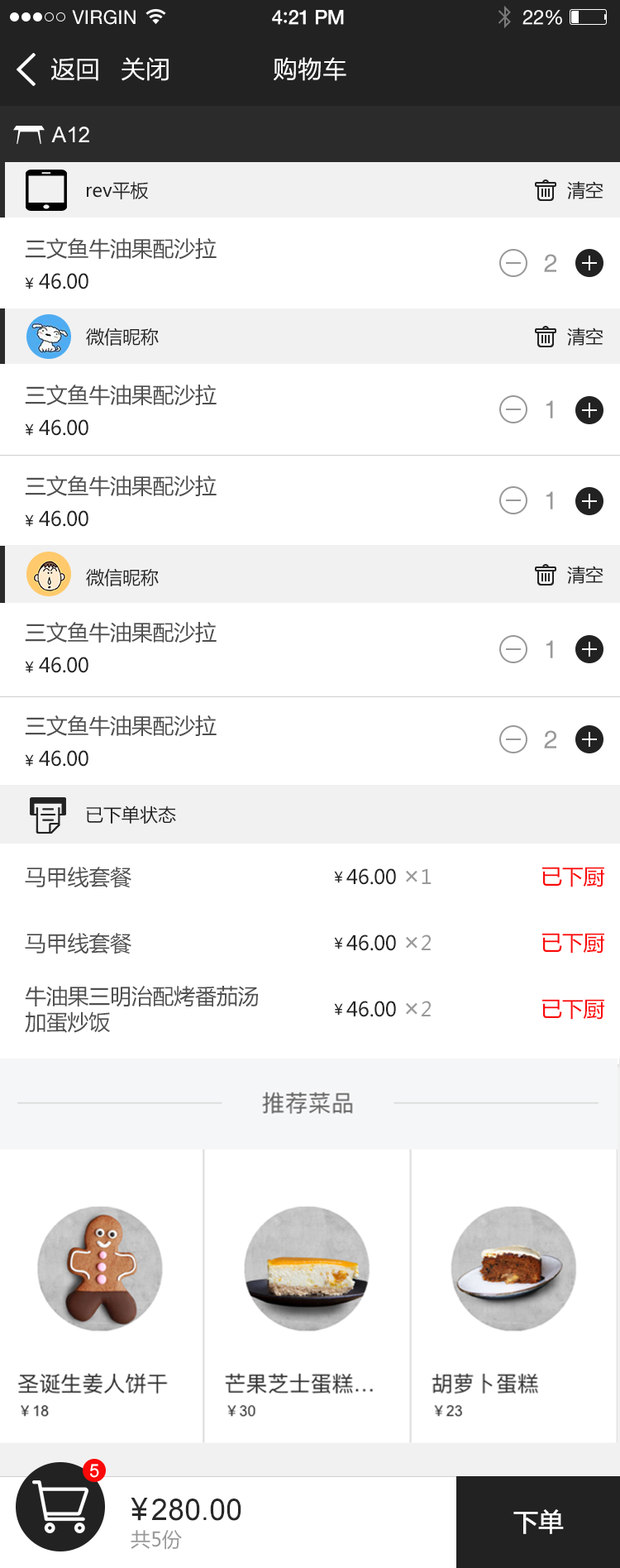
<style>
.page{position:relative;width:620px;height:1568px;background:#ffffff}
.page>*{position:absolute;margin:0}
.t1{font:19px "HelveticaNeue";letter-spacing:0.02em;color:#ffffff}
.t2{font:19.8px "HelveticaNeue-Medium";letter-spacing:-0.02em;color:#ffffff}
.t3{font:21.5px "Avenir-Medium";letter-spacing:-0.02em;color:#ffffff}
.t4{font:19.8px "HelveticaNeue";letter-spacing:-0.02em;color:#ffffff}
.t5{font:24.8px "FZLTHK--GBK1-0";color:#ffffff}
.t6{font:21.5px "ArialMT";color:#ffffff}
.t7{font:18.2px "MicrosoftYaHei";color:#222222}
.t8{font:21.5px "MicrosoftYaHei";letter-spacing:-0.01em;color:#4f4f4f}
.t9{font:24.8px "Helvetica";letter-spacing:-0.01em;color:#999999}
.t10{font:14.9px "MicrosoftYaHei";letter-spacing:-0.01em;color:#222222}
.t11{font:19.8px "MicrosoftYaHei";letter-spacing:-0.01em;color:#222222}
.t12{font:24.8px "MicrosoftYaHei";letter-spacing:-0.01em;color:#999999}
.t13{font:19.8px "MicrosoftYaHei";letter-spacing:-0.01em;color:#999999}
.t14{font:21.5px "MicrosoftYaHei";letter-spacing:-0.01em;color:#fb0909}
.t15{font:18.2px "ArialMT";color:#ffffff}
.t16{font:29.8px "MicrosoftYaHei";letter-spacing:-0.01em;color:#282828}
.t17{font:29.8px "ArialMT";color:#282828}
.t18{font:24.8px "MicrosoftYaHei";letter-spacing:-0.01em;color:#ffffff;font-weight:bold}
.t19{font:19.8px "MicrosoftYaHei";color:#999999}
</style>
<div class="page">
<p class="t1" style="left:72px;top:10px;width:64px;height:15px">VIRGIN</p>
<p class="t2" style="left:272px;top:10px;width:72px;height:15px">4<span class="t3">:</span>21 PM</p>
<p class="t4" style="left:523px;top:10px;width:39px;height:15px">22%</p>
<p class="t5" style="left:51px;top:58px;width:47px;height:23px">返回</p>
<p class="t5" style="left:122px;top:57px;width:47px;height:24px">关闭</p>
<p class="t5" style="left:274px;top:57px;width:73px;height:24px">购物车</p>
<p class="t6" style="left:51px;top:127px;width:38px;height:15px">A12</p>
<p class="t7" style="left:87px;top:181px;width:62px;height:18px">rev平板</p>
<p class="t7" style="left:567px;top:181px;width:37px;height:18px">清空</p>
<p class="t8" style="left:25px;top:238px;width:192px;height:22px">三文鱼牛油果配沙拉</p>
<p class="t9" style="left:544px;top:254px;width:13px;height:18px">2</p>
<p class="t10" style="left:25px;top:277px;width:9px;height:12px">￥</p>
<p class="t11" style="left:39px;top:273px;width:49px;height:16px">46.00</p>
<p class="t7" style="left:86px;top:327px;width:73px;height:19px">微信昵称</p>
<p class="t7" style="left:567px;top:327px;width:37px;height:19px">清空</p>
<p class="t8" style="left:25px;top:385px;width:192px;height:21px">三文鱼牛油果配沙拉</p>
<p class="t9" style="left:546px;top:400px;width:7px;height:18px">1</p>
<p class="t10" style="left:25px;top:423px;width:9px;height:13px">￥</p>
<p class="t11" style="left:39px;top:419px;width:49px;height:17px">46.00</p>
<p class="t8" style="left:25px;top:476px;width:192px;height:21px">三文鱼牛油果配沙拉</p>
<p class="t9" style="left:546px;top:491px;width:7px;height:18px">1</p>
<p class="t10" style="left:25px;top:514px;width:9px;height:13px">￥</p>
<p class="t11" style="left:39px;top:510px;width:49px;height:17px">46.00</p>
<p class="t7" style="left:86px;top:568px;width:73px;height:18px">微信昵称</p>
<p class="t7" style="left:567px;top:566px;width:37px;height:18px">清空</p>
<p class="t8" style="left:25px;top:622px;width:192px;height:21px">三文鱼牛油果配沙拉</p>
<p class="t9" style="left:546px;top:640px;width:7px;height:18px">1</p>
<p class="t10" style="left:25px;top:661px;width:9px;height:12px">￥</p>
<p class="t11" style="left:39px;top:657px;width:49px;height:16px">46.00</p>
<p class="t8" style="left:25px;top:715px;width:192px;height:22px">三文鱼牛油果配沙拉</p>
<p class="t9" style="left:544px;top:730px;width:13px;height:18px">2</p>
<p class="t10" style="left:25px;top:754px;width:9px;height:13px">￥</p>
<p class="t11" style="left:39px;top:750px;width:49px;height:17px">46.00</p>
<p class="t7" style="left:86px;top:806px;width:90px;height:18px">已下单状态</p>
<p class="t8" style="left:25px;top:867px;width:106px;height:21px">马甲线套餐</p>
<p class="t11" style="left:347px;top:868px;width:85px;height:17px">46.00 <span class="t12">×</span><span class="t13">1</span></p>
<p class="t14" style="left:543px;top:867px;width:62px;height:20px">已下厨</p>
<p class="t10" style="left:334px;top:871px;width:9px;height:12px">￥</p>
<p class="t8" style="left:25px;top:933px;width:106px;height:21px">马甲线套餐</p>
<p class="t10" style="left:334px;top:937px;width:9px;height:12px">￥</p>
<p class="t11" style="left:347px;top:935px;width:84px;height:16px">46.00 <span class="t12">×</span><span class="t13">2</span></p>
<p class="t14" style="left:543px;top:933px;width:62px;height:21px">已下厨</p>
<p class="t8" style="left:25px;top:986px;width:233px;height:47px">牛油果三明治配烤番茄汤<br>加蛋炒饭</p>
<p class="t11" style="left:347px;top:1001px;width:84px;height:16px">46.00 <span class="t12">×</span><span class="t13">2</span></p>
<p class="t14" style="left:543px;top:999px;width:62px;height:21px">已下厨</p>
<p class="t10" style="left:334px;top:1003px;width:9px;height:13px">￥</p>
<p class="t15" style="left:90px;top:1464px;width:9px;height:14px">5</p>
<p class="t16" style="left:131px;top:1498px;width:17px;height:23px">￥</p>
<p class="t17" style="left:152px;top:1499px;width:89px;height:22px">280.00</p>
<p class="t18" style="left:514px;top:1509px;width:50px;height:25px">下单</p>
<p class="t19" style="left:131px;top:1530px;width:51px;height:20px">共5份</p>
</div>
